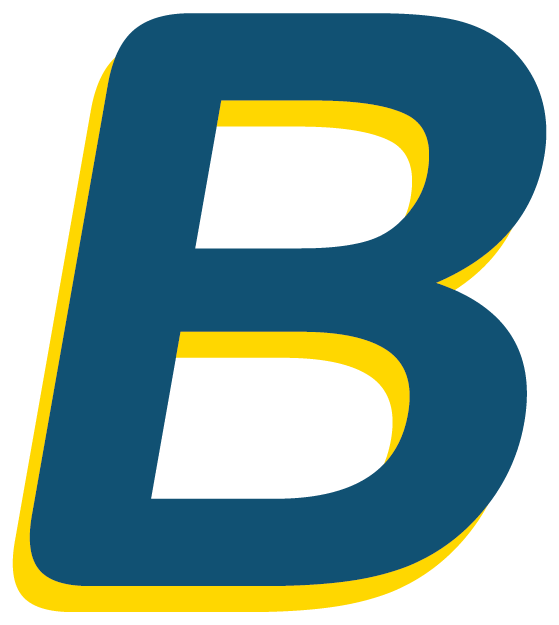
<style>
.page{position:relative;width:559px;height:625px;background:#115173}
.page>*{position:absolute;margin:0}
.t1{font:800px "ArialRoundedMTBold";letter-spacing:0.01em;color:#115173;font-style:italic}
</style>
<div class="page">
<p class="t1" style="left:29px;top:13px;width:518px;height:573px">B</p>
<p class="t1" style="left:12px;top:39px;width:518px;height:573px">B</p>
</div>
